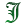
<style>
.page{position:relative;width:25px;height:25px;background:#ffffff}
.page>*{position:absolute;margin:0}
.t1{font:24px "OldEnglishTextMT"}
</style>
<div class="page">
<p class="t1" style="left:5px;top:2px;width:16px;height:21px">J</p>
</div>
